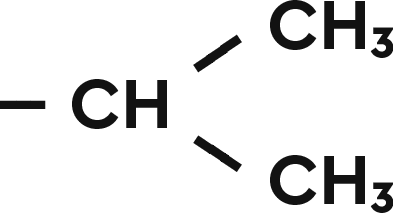
<style>
.page{position:relative;width:393px;height:213px;background:#ffffff}
.page>*{position:absolute;margin:0}
.t1{font:72px "CeraPro-Bold";color:#121212}
.t2{font:80.2px "CeraPro-Bold";color:#121212}
.t3{font:79.5px "CeraPro-Bold";color:#121212}
</style>
<div class="page">
<p class="t1" style="left:270px;top:0px;width:124px;height:58px">CH₃</p>
<p class="t2" style="left:193px;top:34px;width:49px;height:39px;rotate:-34deg">---</p>
<p class="t1" style="left:0px;top:79px;width:167px;height:50px">--- CH</p>
<p class="t3" style="left:193px;top:135px;width:49px;height:37px;rotate:34deg">---</p>
<p class="t1" style="left:270px;top:155px;width:124px;height:58px">CH₃</p>
</div>
